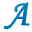
<style>
.page{position:relative;width:32px;height:32px;background:#ffffff}
.page>*{position:absolute;margin:0}
.t1{font:36px "MonotypeCorsiva";color:#0089c9;font-weight:bold}
</style>
<div class="page">
<p class="t1" style="left:3px;top:2px;width:27px;height:28px">A</p>
</div>
